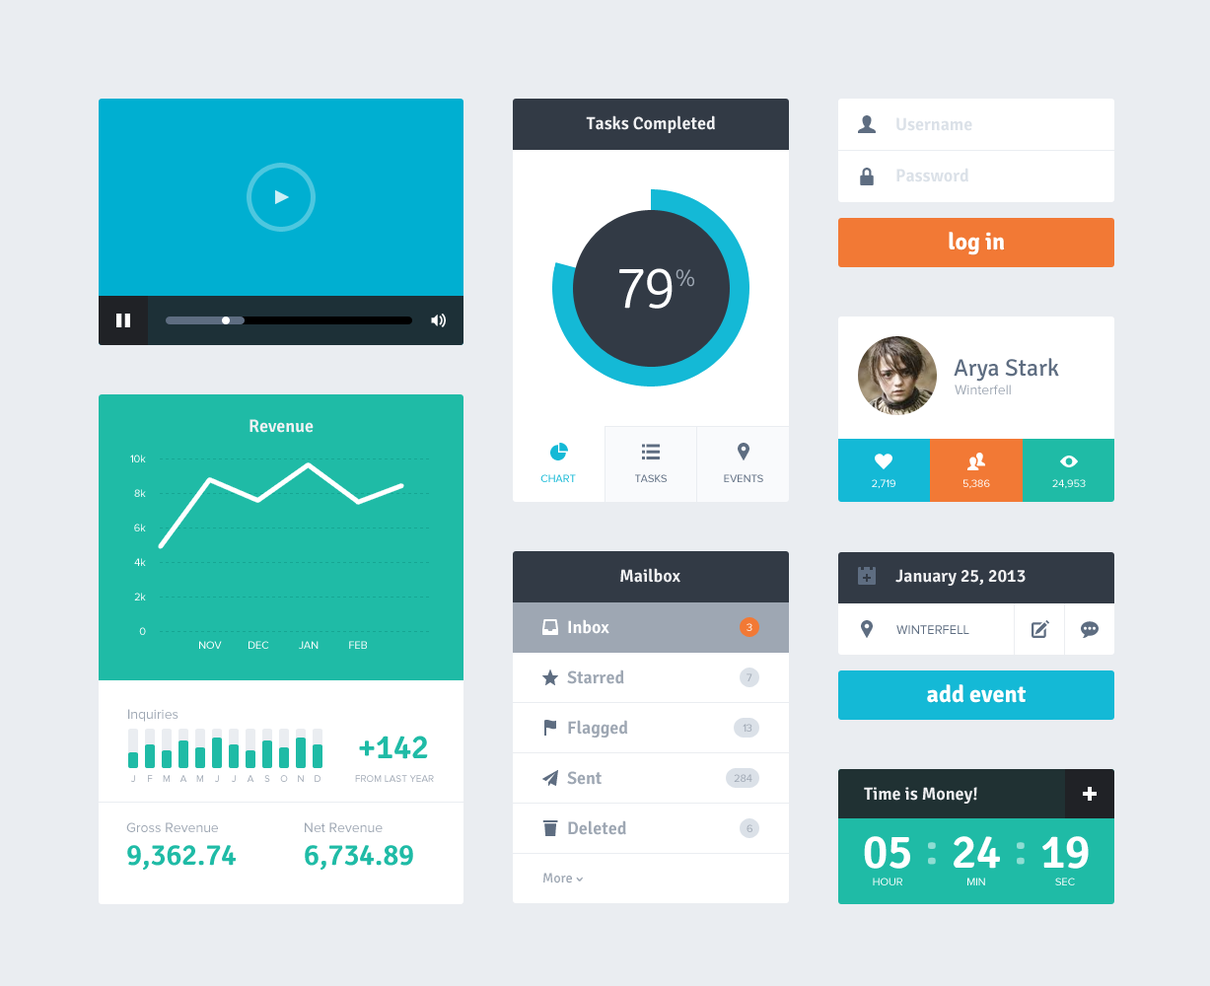
<style>
.page{position:relative;width:1210px;height:986px;background:#eaedf1}
.page>*{position:absolute;margin:0}
.t1{font:17.7px "Signika-Semibold";color:#f1f1f3}
.t2{font:17.7px "Signika-Semibold";color:#dbe1e8}
.t3{font:13.8px "SSStandard";color:#cceff6}
.t4{font:23.7px "Signika-Bold";color:#ffffff}
.t5{font:59.1px "Signika-Light";letter-spacing:-0.05em;color:#ffffff}
.t6{font:23.7px "Signika-Light";color:#9ea7b3}
.t7{font:23.7px "Signika-Regular";color:#5e6d81}
.t8{font:13.8px "ProximaNova-Regular";color:#9ea7b3}
.t9{font:10.8px/34.5px "ProximaNova-Regular";color:#ffffff}
.t10{font:17.7px "SSStandard";color:#ffffff}
.t11{font:10.8px "ProximaNova-Regular";color:#14b9d6;text-transform:uppercase}
.t12{font:10.8px "ProximaNova-Regular";color:#5e6d81;text-transform:uppercase}
.t13{font:10.8px "ProximaNova-Regular";color:#ffffff;text-transform:uppercase}
.t14{font:15.8px "SSStandard";color:#ffffff}
.t15{font:17.7px "Signika-Semibold";color:#ffffff}
.t16{font:10.8px "ProximaNova-Regular"}
.t17{font:12.8px "ProximaNova-Regular";color:#5e6d81;text-transform:uppercase}
.t18{font:10.8px "ProximaNova-Regular";color:#ffffff}
.t19{font:15.8px "SSStandard";color:#5e6d81}
.t20{font:17.7px "Signika-Semibold";color:#9ea7b3}
.t21{font:10.8px "ProximaNova-Regular";color:#9ea7b3}
.t22{font:33.5px "Signika-Semibold";color:#1fbba6}
.t23{font:9.9px "ProximaNova-Regular"}
.t24{font:9.9px "ProximaNova-Regular";color:#9ea7b3}
.t25{font:9.9px "ProximaNova-Regular";color:#9ea7b3;text-transform:uppercase}
.t26{font:29.6px "Signika-Semibold";color:#1fbba6}
.t27{font:47.3px "Signika-Semibold";color:#ffffff}
.t28{font:47.3px "Signika-Semibold";color:#8fddd3}
.t29{font:13.8px "Signika-Regular";color:#9ea7b3}
.t30{font:10.8px "ProximaNova-Regular";text-transform:uppercase}
</style>
<div class="page">
<p class="t1" style="left:586px;top:115px;width:129px;height:18px">Tasks Completed</p>
<p class="t2" style="left:896px;top:117px;width:76px;height:14px">Username</p>
<p class="t2" style="left:896px;top:168px;width:72px;height:14px">Password</p>
<p class="t3" style="left:275px;top:190px;width:14px;height:14px">▶</p>
<p class="t4" style="left:948px;top:232px;width:57px;height:23px">log in</p>
<p class="t5" style="left:619px;top:268px;width:53px;height:41px">79</p>
<p class="t6" style="left:675px;top:269px;width:19px;height:18px">%</p>
<p class="t7" style="left:953px;top:358px;width:106px;height:24px">Arya Stark</p>
<p class="t8" style="left:954px;top:384px;width:56px;height:10px">Winterfell</p>
<p class="t1" style="left:249px;top:419px;width:64px;height:14px">Revenue</p>
<p class="t9" style="left:130px;top:454px;width:16px;height:181px;text-align:right">10k<br>8k<br>6k<br>4k<br>2k<br>0</p>
<p class="t10" style="left:874px;top:453px;width:18px;height:16px">♥</p>
<p class="t11" style="left:540px;top:474px;width:36px;height:8px">Chart</p>
<p class="t12" style="left:635px;top:474px;width:31px;height:8px">Tasks</p>
<p class="t12" style="left:724px;top:474px;width:39px;height:8px">Events</p>
<p class="t13" style="left:871px;top:479px;width:24px;height:10px">2,719</p>
<p class="t13" style="left:962px;top:479px;width:28px;height:10px">5,386</p>
<p class="t13" style="left:1052px;top:479px;width:33px;height:10px">24,953</p>
<p class="t1" style="left:620px;top:568px;width:60px;height:15px">Mailbox</p>
<p class="t1" style="left:895px;top:569px;width:130px;height:17px">January 25, 2013</p>
<p class="t14" style="left:542px;top:619px;width:16px;height:16px">📥</p>
<p class="t15" style="left:568px;top:619px;width:41px;height:15px">Inbox</p>
<p class="t16" style="left:746px;top:623px;width:6px;height:8px">3</p>
<p class="t17" style="left:896px;top:625px;width:73px;height:9px">Winterfell</p>
<p class="t18" style="left:199px;top:641px;width:23px;height:8px">NOV</p>
<p class="t18" style="left:248px;top:641px;width:21px;height:8px">DEC</p>
<p class="t18" style="left:299px;top:641px;width:19px;height:8px">JAN</p>
<p class="t18" style="left:349px;top:641px;width:18px;height:8px">FEB</p>
<p class="t19" style="left:542px;top:669px;width:16px;height:16px">⋆</p>
<p class="t20" style="left:567px;top:669px;width:57px;height:15px">Starred</p>
<p class="t21" style="left:746px;top:673px;width:6px;height:8px">7</p>
<p class="t4" style="left:927px;top:684px;width:99px;height:19px">add event</p>
<p class="t8" style="left:128px;top:709px;width:50px;height:13px">Inquiries</p>
<p class="t19" style="left:544px;top:720px;width:12px;height:15px">⚑</p>
<p class="t20" style="left:568px;top:720px;width:60px;height:17px">Flagged</p>
<p class="t21" style="left:742px;top:724px;width:10px;height:7px">13</p>
<p class="t22" style="left:359px;top:735px;width:69px;height:24px">+142</p>
<p class="t20" style="left:567px;top:771px;width:34px;height:14px">Sent</p>
<p class="t21" style="left:733px;top:774px;width:19px;height:8px">284</p>
<p class="t23" style="left:131px;top:775px;width:4px;height:7px">J</p>
<p class="t24" style="left:148px;top:775px;width:5px;height:7px">F</p>
<p class="t24" style="left:163px;top:775px;width:7px;height:7px">M</p>
<p class="t24" style="left:179px;top:775px;width:8px;height:7px">A</p>
<p class="t24" style="left:196px;top:775px;width:7px;height:7px">M</p>
<p class="t23" style="left:215px;top:775px;width:4px;height:7px">J</p>
<p class="t23" style="left:232px;top:775px;width:4px;height:7px">J</p>
<p class="t24" style="left:246px;top:775px;width:8px;height:7px">A</p>
<p class="t24" style="left:264px;top:775px;width:6px;height:7px">S</p>
<p class="t23" style="left:280px;top:775px;width:8px;height:7px">O</p>
<p class="t24" style="left:298px;top:775px;width:6px;height:7px">N</p>
<p class="t23" style="left:314px;top:775px;width:6px;height:7px">D</p>
<p class="t25" style="left:355px;top:775px;width:79px;height:7px">from last year</p>
<p class="t1" style="left:864px;top:787px;width:113px;height:16px">Time is Money!</p>
<p class="t20" style="left:568px;top:820px;width:58px;height:15px">Deleted</p>
<p class="t8" style="left:126px;top:822px;width:92px;height:10px">Gross Revenue</p>
<p class="t8" style="left:305px;top:822px;width:77px;height:10px">Net Revenue</p>
<p class="t21" style="left:746px;top:824px;width:6px;height:8px">6</p>
<p class="t26" style="left:127px;top:845px;width:109px;height:25px">9,362.74</p>
<p class="t26" style="left:305px;top:845px;width:108px;height:25px">6,734.89</p>
<p class="t27" style="left:864px;top:836px;width:46px;height:33px">05</p>
<p class="t28" style="left:928px;top:842px;width:8px;height:23px">:</p>
<p class="t27" style="left:953px;top:836px;width:47px;height:33px">24</p>
<p class="t28" style="left:1016px;top:842px;width:8px;height:23px">:</p>
<p class="t27" style="left:1042px;top:836px;width:46px;height:33px">19</p>
<p class="t29" style="left:543px;top:872px;width:29px;height:11px">More</p>
<p class="t6" style="left:576px;top:876px;width:7px;height:5px">ˇ</p>
<p class="t13" style="left:872px;top:877px;width:30px;height:8px">Hour</p>
<p class="t13" style="left:967px;top:877px;width:18px;height:8px">Min</p>
<p class="t30" style="left:1055px;top:877px;width:20px;height:8px">Sec</p>
</div>
